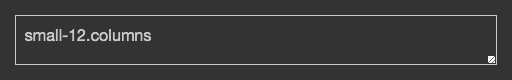
<style>
.page{position:relative;width:512px;height:80px;background:#333333}
.page>*{position:absolute;margin:0}
.t1{font:12px "MyriadPro-Regular";color:#c9c9c9}
</style>
<div class="page">
<p class="t1" style="left:25px;top:29px;width:127px;height:13px">small-12.columns</p>
</div>
